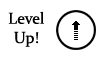
<style>
.page{position:relative;width:100px;height:60px;background:#ffffff}
.page>*{position:absolute;margin:0}
.t1{font:16px "Constantia";color:#000000}
</style>
<div class="page">
<p class="t1" style="left:8px;top:11px;width:36px;height:36px;text-align:center">Level<br>Up!</p>
</div>
